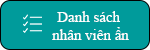
<style>
.page{position:relative;width:150px;height:50px;background:#009b9b}
.page>*{position:absolute;margin:0}
.t1{font:15.3px "TimesNewRomanPSMT";color:#fefefe}
</style>
<div class="page">
<p class="t1" style="left:52px;top:11px;width:77px;height:29px;text-align:center">Danh sách <br>nhân viên ẩn</p>
</div>
